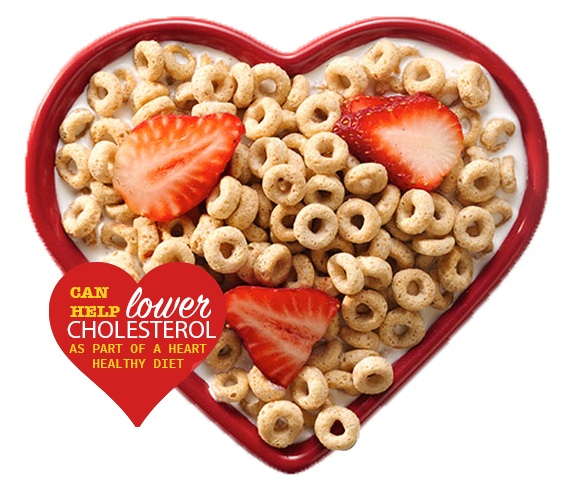
<style>
.page{position:relative;width:570px;height:480px;background:#ffffff}
.page>*{position:absolute;margin:0}
.t1{font:16.2px "AmericanTypewriter-Bold";color:#f8d21e}
.t2{font:48px "SignPainter-HouseScript";color:#ffffff}
.t3{font:25px "MyriadPro-Regular";color:#ffffff}
.t4{font:12.7px "SourceCodePro-Semibold";color:#f8d21e}
</style>
<div class="page">
<p class="t1" style="left:70px;top:287px;width:50px;height:30px">CAN<br>HELP</p>
<p class="t2" style="left:126px;top:287px;width:85px;height:31px">lower</p>
<p class="t3" style="left:67px;top:321px;width:149px;height:17px">CHOLESTEROL</p>
<p class="t4" style="left:69px;top:344px;width:138px;height:24px;text-align:center">AS PART OF A HEART<br>HEALTHY DIET</p>
</div>
